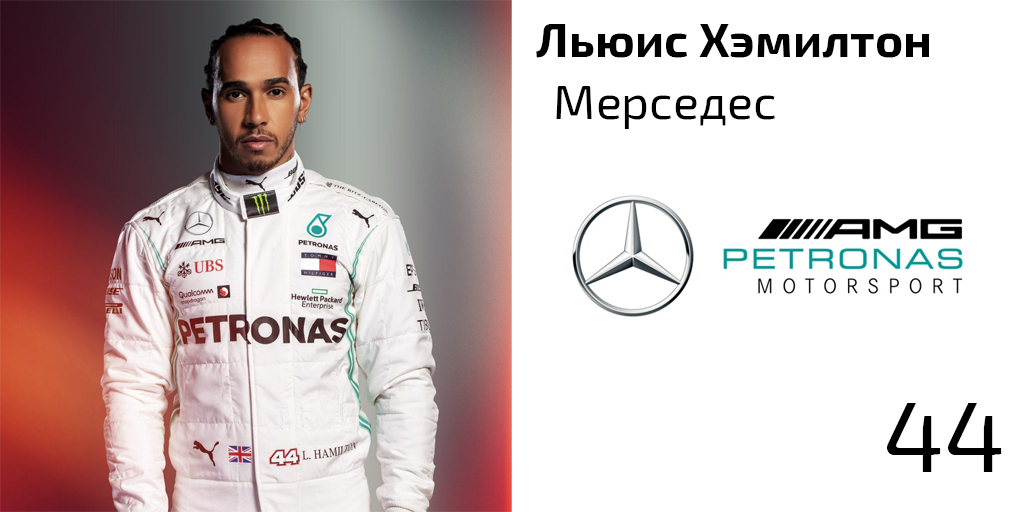
<style>
.page{position:relative;width:1024px;height:512px;background:#ffffff}
.page>*{position:absolute;margin:0}
.t1{font:48px "Exo2-Bold";color:#000000}
.t2{font:48px "Exo2-Regular";color:#000000}
.t3{font:100px "Exo2-Regular";color:#000000}
</style>
<div class="page">
<p class="t1" style="left:536px;top:24px;width:393px;height:34px">Льюис Хэмилтон</p>
<p class="t2" style="left:556px;top:86px;width:219px;height:43px">Мерседес</p>
<p class="t3" style="left:886px;top:403px;width:116px;height:69px">44</p>
</div>
